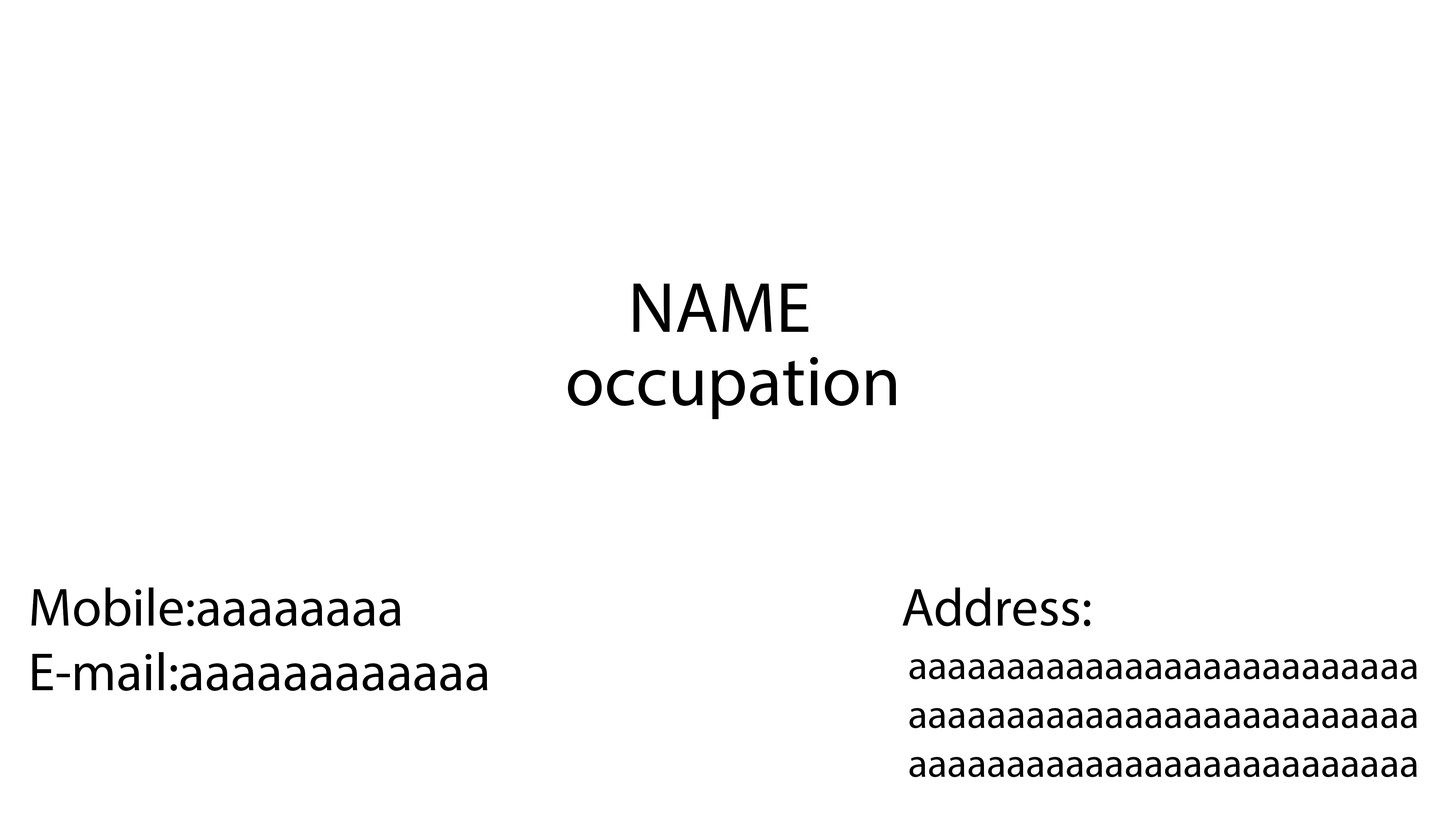
<style>
.page{position:relative;width:1445px;height:825px;background:#ffffff}
.page>*{position:absolute;margin:0}
.t1{font:71.3px "MyriadPro-Regular";color:#000000}
.t2{font:53.9px "MyriadPro-Regular";color:#000000}
.t3{font:40.8px "MyriadPro-Regular";color:#000000}
</style>
<div class="page">
<p class="t1" style="left:633px;top:283px;width:175px;height:49px">NAME<br>NAm</p>
<p class="t1" style="left:568px;top:357px;width:328px;height:62px">occupation</p>
<p class="t2" style="left:31px;top:588px;width:456px;height:103px">Mobile:aaaaaaaa<br>E-mail:aaaaaaaaaaaaa</p>
<p class="t2" style="left:902px;top:588px;width:188px;height:39px">Address:</p>
<p class="t3" style="left:909px;top:659px;width:507px;height:119px">aaaaaaaaaaaaaaaaaaaaaaaaaaaaaaaaaaaaaaaaaaaaaaaaaaaaaaaaaaaaaaaaaaaaaaaaaaaaaa</p>
</div>
